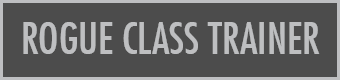
<style>
.page{position:relative;width:340px;height:80px;background:#4c4c4c}
.page>*{position:absolute;margin:0}
.t1{font:42.7px "FuturaCondensed";color:#bebfc1}
</style>
<div class="page">
<p class="t1" style="left:23px;top:22px;width:297px;height:32px">ROGUE CLASS TRAINER</p>
</div>
